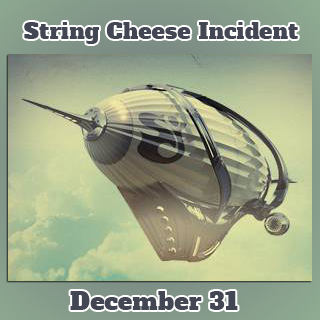
<style>
.page{position:relative;width:320px;height:320px}
.page>*{position:absolute;margin:0}
.t1{font:22px "AlfaSlabOne-Regular";letter-spacing:0.018em;color:#434753}
.t2{font:24px "AlfaSlabOne-Regular";letter-spacing:0.018em;color:#434753}
</style>
<div class="page">
<p class="t1" style="left:24px;top:22px;width:274px;height:22px">String Cheese Incident</p>
<p class="t2" style="left:70px;top:291px;width:168px;height:19px">December 31</p>
</div>
